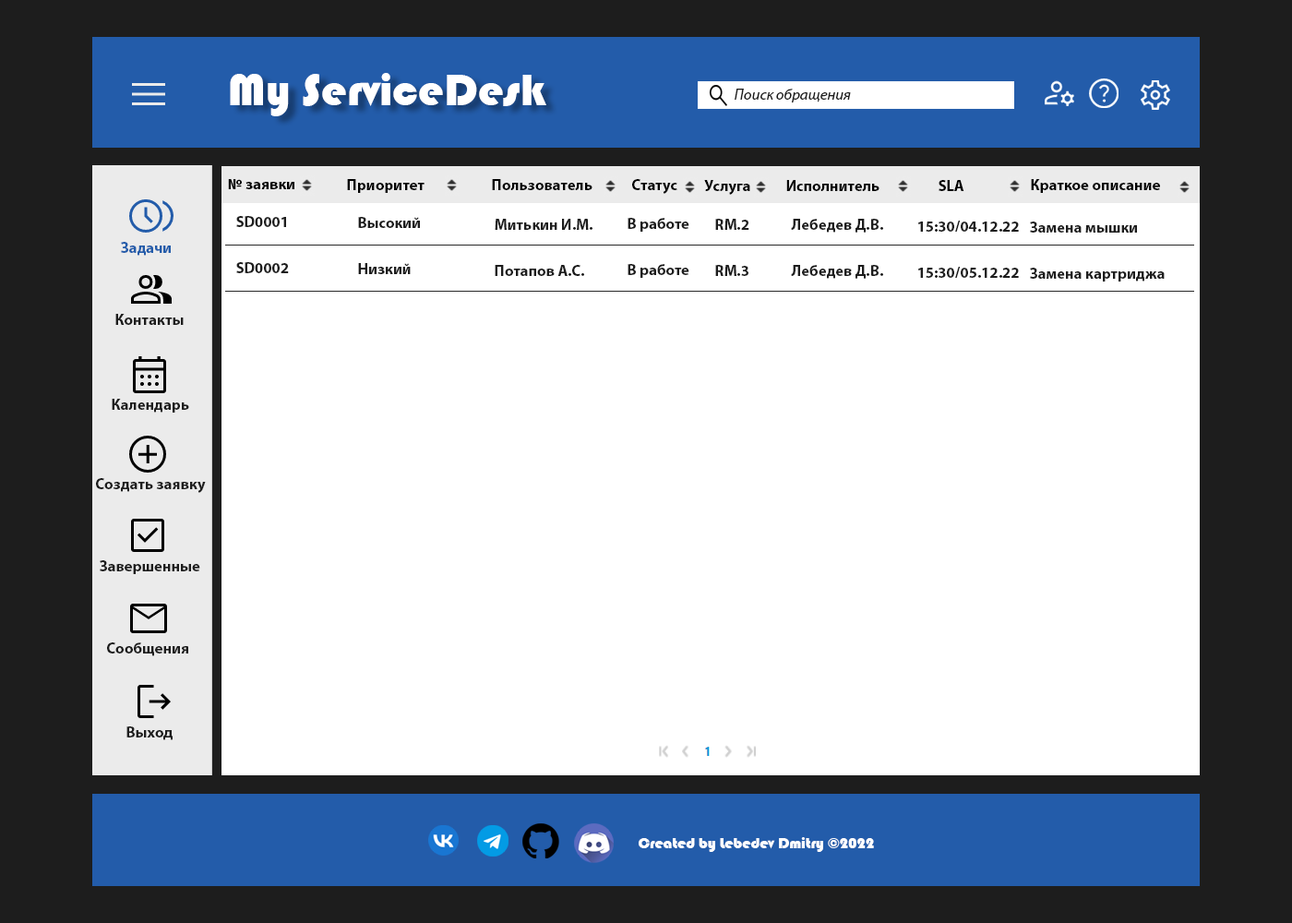
<style>
.page{position:relative;width:1292px;height:923px;background:#ffffff}
.page>*{position:absolute;margin:0}
.t1{font:46.1px "Bauhaus93";color:#ffffff}
.t2{font:15.4px "MyriadPro-It";color:#1d1d1d}
.t3{font:15.4px "MyriadPro-Bold";color:#000000}
.t4{font:15.4px "MyriadPro-Bold";color:#1d1d1d}
.t5{font:15.4px "MyriadPro-Bold";color:#235caa}
.t6{font:15.4px "Bauhaus93";color:#ffffff}
</style>
<div class="page">
<p class="t1" style="left:230px;top:73px;width:316px;height:43px">My ServiceDesk</p>
<p class="t2" style="left:735px;top:89px;width:116px;height:13px">Поиск обращения</p>
<p class="t3" style="left:228px;top:179px;width:66px;height:10px">№ заявки</p>
<p class="t3" style="left:347px;top:179px;width:78px;height:14px">Приоритет</p>
<p class="t3" style="left:492px;top:179px;width:100px;height:11px">Пользователь</p>
<p class="t3" style="left:632px;top:179px;width:45px;height:15px">Статус</p>
<p class="t3" style="left:704px;top:180px;width:46px;height:15px">Услуга</p>
<p class="t3" style="left:786px;top:180px;width:94px;height:11px">Исполнитель</p>
<p class="t3" style="left:939px;top:180px;width:25px;height:11px">SLA</p>
<p class="t3" style="left:1031px;top:179px;width:129px;height:14px">Краткое описание</p>
<p class="t4" style="left:236px;top:216px;width:50px;height:11px">SD0001</p>
<p class="t4" style="left:358px;top:217px;width:62px;height:11px">Высокий</p>
<p class="t4" style="left:495px;top:219px;width:97px;height:11px">Митькин И.М.</p>
<p class="t4" style="left:628px;top:218px;width:61px;height:14px">В работе</p>
<p class="t4" style="left:715px;top:219px;width:34px;height:11px">RM.2</p>
<p class="t4" style="left:791px;top:219px;width:92px;height:14px">Лебедев Д.В.</p>
<p class="t4" style="left:918px;top:221px;width:101px;height:11px">15:30/04.12.22</p>
<p class="t4" style="left:1030px;top:221px;width:107px;height:12px">Замена мышки</p>
<p class="t5" style="left:121px;top:242px;width:50px;height:14px">Задачи</p>
<p class="t4" style="left:236px;top:262px;width:53px;height:11px">SD0002</p>
<p class="t4" style="left:358px;top:263px;width:53px;height:11px">Низкий</p>
<p class="t4" style="left:495px;top:265px;width:89px;height:11px">Потапов А.С.</p>
<p class="t4" style="left:628px;top:264px;width:61px;height:14px">В работе</p>
<p class="t4" style="left:715px;top:265px;width:33px;height:11px">RM.3</p>
<p class="t4" style="left:791px;top:265px;width:92px;height:14px">Лебедев Д.В.</p>
<p class="t4" style="left:918px;top:267px;width:101px;height:11px">15:30/05.12.22</p>
<p class="t4" style="left:1030px;top:268px;width:135px;height:13px">Замена картриджа</p>
<p class="t4" style="left:115px;top:314px;width:69px;height:11px">Контакты</p>
<p class="t4" style="left:112px;top:399px;width:77px;height:14px">Календарь</p>
<p class="t4" style="left:96px;top:478px;width:110px;height:15px">Создать заявку</p>
<p class="t4" style="left:100px;top:560px;width:100px;height:14px">Завершенные</p>
<p class="t4" style="left:107px;top:642px;width:81px;height:14px">Сообщения</p>
<p class="t4" style="left:126px;top:726px;width:47px;height:14px">Выход</p>
<p class="t6" style="left:639px;top:837px;width:235px;height:15px">Created by Lebedev Dmitry ©2022</p>
</div>
